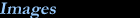
<style>
.page{position:relative;width:140px;height:18px;background:#000000}
.page>*{position:absolute;margin:0}
.t1{font:18px "Garamond-Bold";color:#99ccff;font-style:italic}
</style>
<div class="page">
<p class="t1" style="left:0px;top:2px;width:56px;height:17px">Images</p>
</div>
